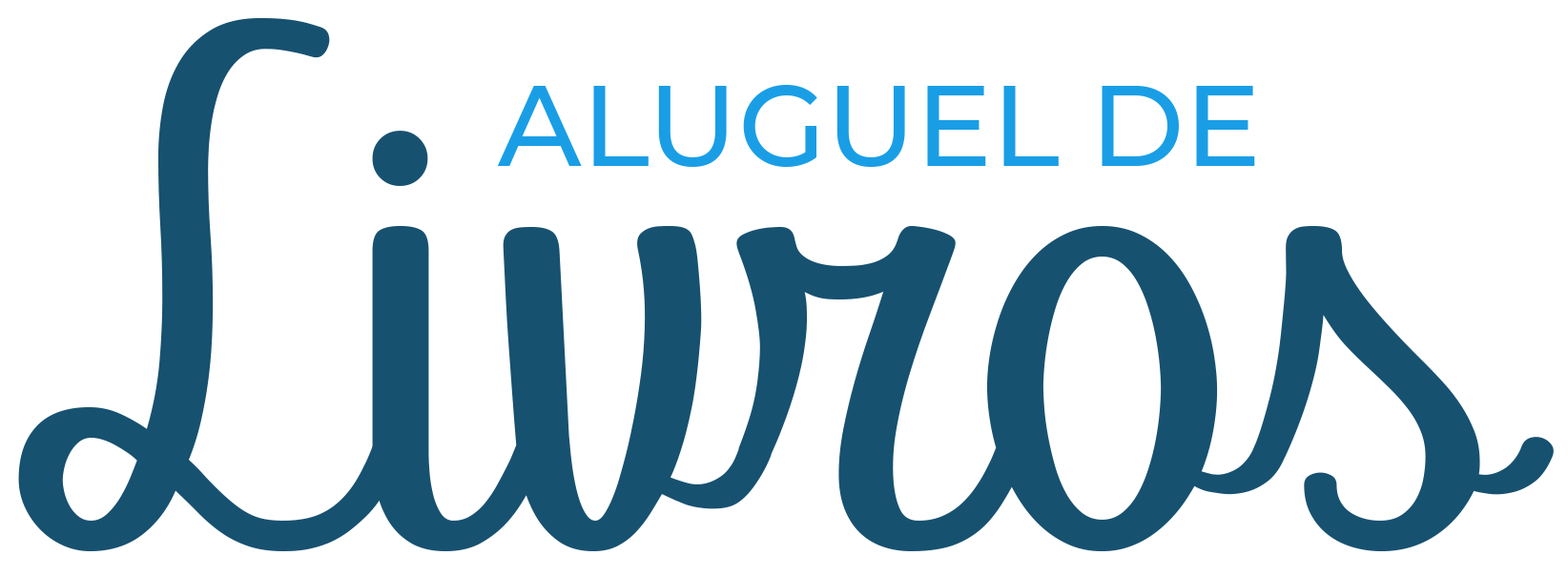
<style>
.page{position:relative;width:1568px;height:576px;background:#ffffff}
.page>*{position:absolute;margin:0}
.t1{font:692.9px "Abecedary-Regular";color:#175170}
.t2{font:114px "Montserrat-Medium";color:#199ee6}
</style>
<div class="page">
<p class="t1" style="left:18px;top:18px;width:1536px;height:533px">Livros</p>
<p class="t2" style="left:497px;top:85px;width:758px;height:82px">ALUGUEL DE</p>
</div>
